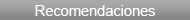
<style>
.page{position:relative;width:190px;height:20px}
.page>*{position:absolute;margin:0}
.t1{font:14.6px "ArialMT";color:#ffffff}
</style>
<div class="page">
<p class="t1" style="left:35px;top:5px;width:121px;height:11px">Recomendaciones</p>
</div>
